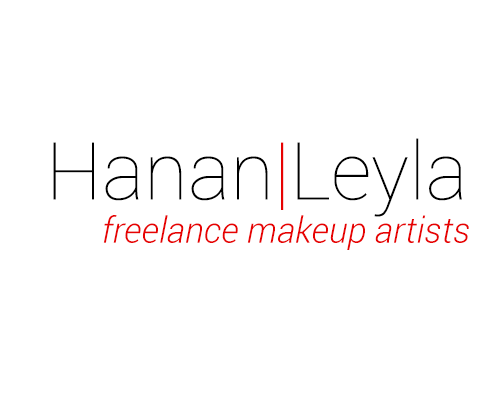
<style>
.page{position:relative;width:500px;height:400px;background:#ffffff}
.page>*{position:absolute;margin:0}
.t1{font:36px "Roboto-LightItalic";color:#e70202}
.t2{font:80px "Roboto-Thin";color:#000000}
.t3{font:80px "Roboto-Thin";color:#e70202}
</style>
<div class="page">
<p class="t1" style="left:53px;top:138px;width:416px;height:112px"><span class="t2">Hanan</span><span class="t3">|</span><span class="t2">Leyla<br>          </span>freelance makeup artists</p>
</div>
